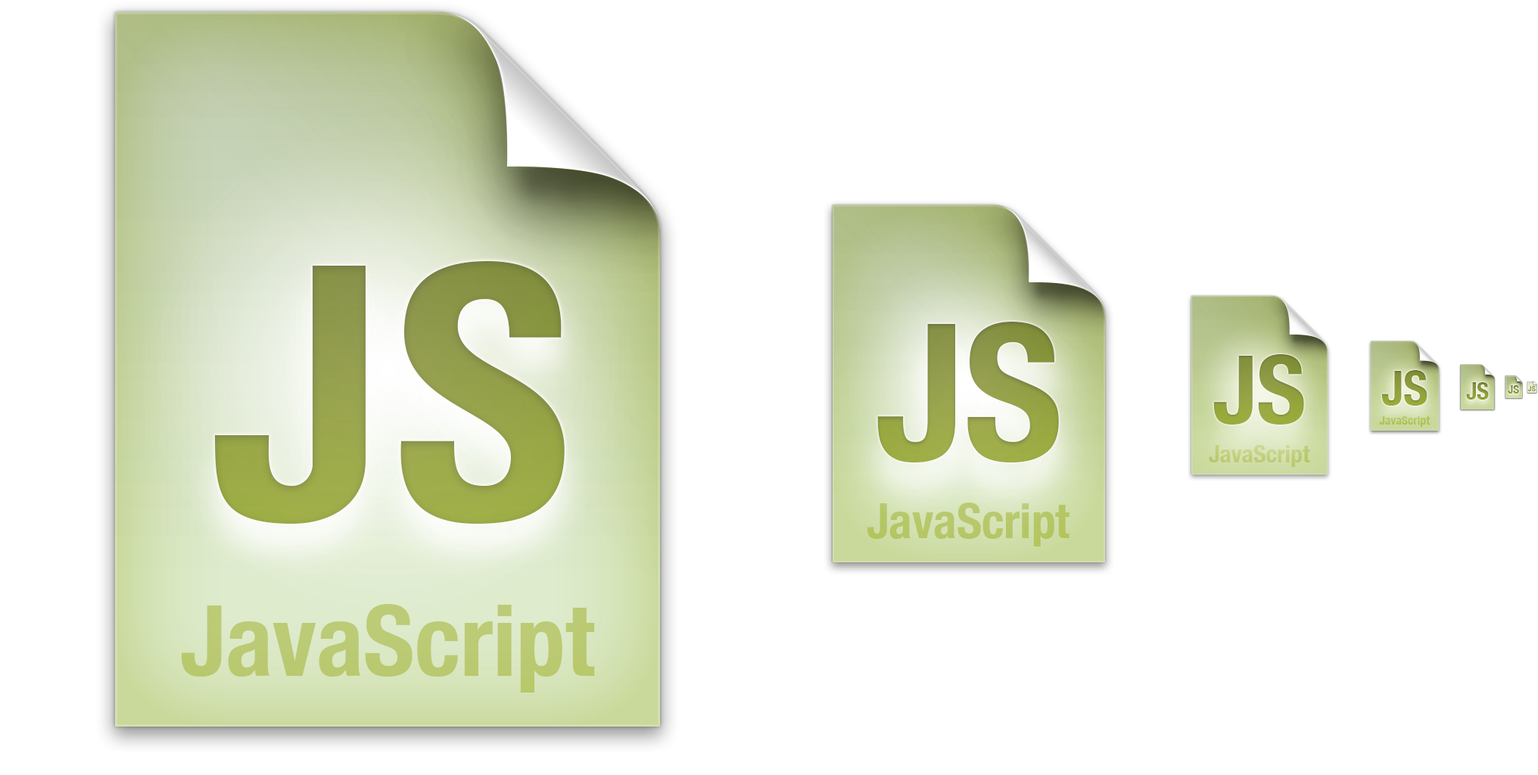
<style>
.page{position:relative;width:1538px;height:775px;background:#ffffff}
.page>*{position:absolute;margin:0}
.t1{font:350.9px "Univers-CondensedBold";color:#96a149}
.t2{font:191px "HelveticaNeue-CondensedBold";color:#95a148}
.t3{font:95.5px "HelveticaNeue-CondensedBold";color:#92a03f}
.t4{font:47.8px "HelveticaNeue-CondensedBold";color:#8f9e39}
.t5{font:23.9px "HelveticaNeue-CondensedBold";color:#8b9838}
.t6{font:11.1px "HelveticaNeue-CondensedBold";color:#849135}
.t7{font:7.6px "HelveticaNeue-CondensedBold";color:#8c954d;scale:1.05 1}
.t8{font:12px "HelveticaNeue-CondensedBold";color:#b0c258}
.t9{font:24.1px "HelveticaNeue-CondensedBold";color:#c0ce7b}
.t10{font:48.1px "HelveticaNeue-CondensedBold";color:#b7c767}
.t11{font:98.4px "HelveticaNeue-CondensedBold";color:#bbca74}
</style>
<div class="page">
<p class="t1" style="left:215px;top:261px;width:350px;height:263px">JS</p>
<p class="t2" style="left:877px;top:322px;width:182px;height:141px">JS</p>
<p class="t3" style="left:1213px;top:354px;width:91px;height:71px">JS</p>
<p class="t4" style="left:1382px;top:370px;width:46px;height:36px">JS</p>
<p class="t5" style="left:1466px;top:382px;width:23px;height:18px">JS</p>
<p class="t6" style="left:1508px;top:385px;width:11px;height:9px">JS</p>
<p class="t7" style="left:1528px;top:386px;width:8px;height:5px">JS</p>
<p class="t8" style="left:1379px;top:416px;width:51px;height:11px">JavaScript</p>
<p class="t9" style="left:1209px;top:445px;width:101px;height:22px">JavaScript</p>
<p class="t10" style="left:868px;top:503px;width:202px;height:44px">JavaScript</p>
<p class="t11" style="left:181px;top:604px;width:414px;height:89px">JavaScript</p>
</div>
